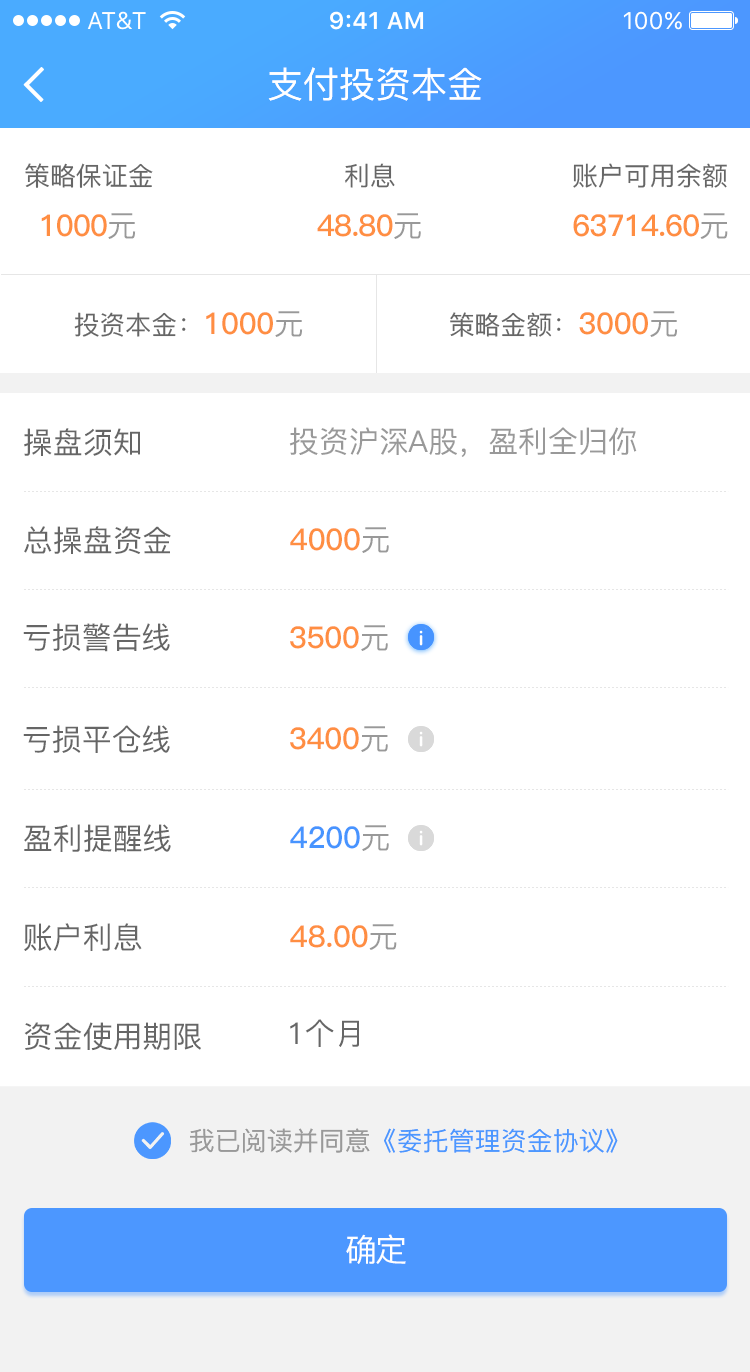
<style>
.page{position:relative;width:750px;height:1372px;background:#ffffff}
.page>*{position:absolute;margin:0}
.t1{font:36px "PingFang-SC-Medium";color:#ffffff}
.t2{font:26px "PingFang-SC-Medium";color:#666666}
.t3{font:30px "PingFang-SC-Bold";letter-spacing:-0.02em;color:#ff8e42}
.t4{font:30px "PingFang-SC-Medium";letter-spacing:-0.02em;color:#999999}
.t5{font:30px "PingFang-SC-Bold";color:#ff8e42}
.t6{font:30px "PingFang-SC-Medium";color:#999999}
.t7{font:30px "PingFang-SC-Medium";color:#666666}
.t8{font:30px "PingFang-SC-Bold";color:#4794ff}
.t9{font:26px "PingFang-SC-Medium";color:#4c97ff}
.t10{font:26px "PingFang-SC-Medium";color:#999999}
.t11{font:32px "PingFang-SC-Medium";letter-spacing:-0.06em;color:#ffffff}
</style>
<div class="page">
<p class="t1" style="left:268px;top:67px;width:214px;height:34px">支付投资本金</p>
<p class="t2" style="left:25px;top:163px;width:128px;height:25px">策略保证金</p>
<p class="t2" style="left:345px;top:163px;width:50px;height:25px">利息</p>
<p class="t2" style="left:573px;top:163px;width:154px;height:25px">账户可用余额</p>
<p class="t3" style="left:41px;top:213px;width:95px;height:26px">1000<span class="t4">元</span></p>
<p class="t3" style="left:317px;top:213px;width:104px;height:26px">48.80<span class="t4">元</span></p>
<p class="t3" style="left:573px;top:213px;width:155px;height:26px">63714.60<span class="t4">元</span></p>
<p class="t2" style="left:74px;top:311px;width:229px;height:26px">投资本金：<span class="t5">1000</span><span class="t6">元</span></p>
<p class="t2" style="left:450px;top:311px;width:228px;height:26px">策略金额：<span class="t5">3000</span><span class="t6">元</span></p>
<p class="t7" style="left:24px;top:428px;width:116px;height:28px">操盘须知</p>
<p class="t6" style="left:289px;top:427px;width:348px;height:30px">投资沪深A股，盈利全归你</p>
<p class="t7" style="left:24px;top:526px;width:147px;height:28px">总操盘资金</p>
<p class="t5" style="left:290px;top:527px;width:99px;height:26px">4000<span class="t6">元</span></p>
<p class="t7" style="left:23px;top:623px;width:147px;height:29px">亏损警告线</p>
<p class="t5" style="left:290px;top:625px;width:98px;height:26px">3500<span class="t6">元</span></p>
<p class="t7" style="left:23px;top:725px;width:147px;height:28px">亏损平仓线</p>
<p class="t5" style="left:290px;top:726px;width:98px;height:26px">3400<span class="t6">元</span></p>
<p class="t7" style="left:24px;top:824px;width:147px;height:28px">盈利提醒线</p>
<p class="t8" style="left:290px;top:825px;width:99px;height:26px">4200<span class="t6">元</span></p>
<p class="t7" style="left:24px;top:923px;width:118px;height:28px">账户利息</p>
<p class="t5" style="left:290px;top:924px;width:107px;height:26px">48.00<span class="t6">元</span></p>
<p class="t7" style="left:24px;top:1022px;width:177px;height:29px">资金使用期限</p>
<p class="t7" style="left:290px;top:1019px;width:69px;height:28px">1个月</p>
<p class="t9" style="left:189px;top:1128px;width:429px;height:25px"><span class="t10">我已阅读并同意</span>《委托管理资金协议》</p>
<p class="t11" style="left:346px;top:1234px;width:60px;height:30px">确定</p>
</div>
